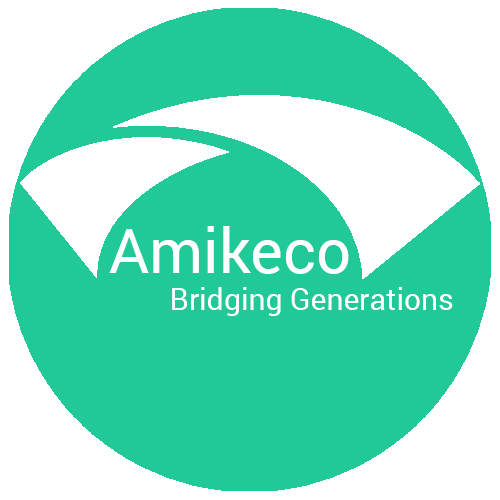
<style>
.page{position:relative;width:500px;height:500px;background:#20c997}
.page>*{position:absolute;margin:0}
.t1{font:62px "Roboto-Regular";color:#ffffff}
.t2{font:30px "Roboto-Regular";color:#ffffff}
</style>
<div class="page">
<p class="t1" style="left:109px;top:226px;width:240px;height:48px">Amikeco</p>
<p class="t2" style="left:172px;top:287px;width:281px;height:29px">Bridging Generations</p>
</div>
